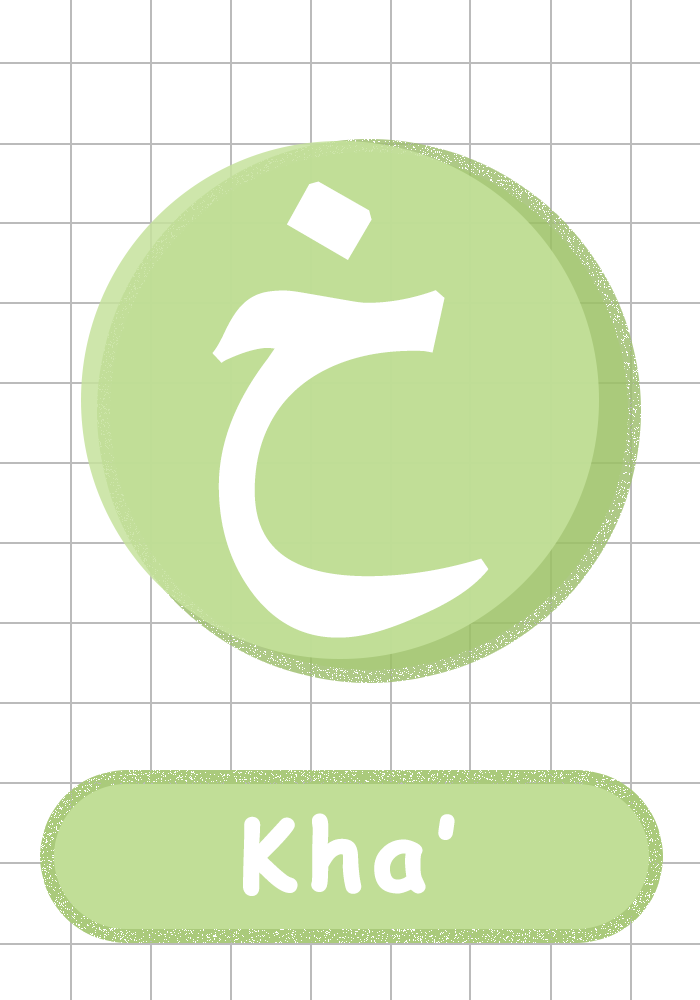
<style>
.page{position:relative;width:700px;height:1000px;background:#ffffff}
.page>*{position:absolute;margin:0}
.t1{font:486.8px "GeezaPro";letter-spacing:0.08em;color:#ffffff;font-weight:bold}
.t2{font:95.3px "ComicSansMS-Bold";letter-spacing:0.08em;color:#ffffff;font-weight:bold}
</style>
<div class="page">
<p class="t1" style="left:212px;top:181px;width:277px;height:457px">خ</p>
<p class="t2" style="left:243px;top:813px;width:212px;height:83px">Kha’</p>
</div>
